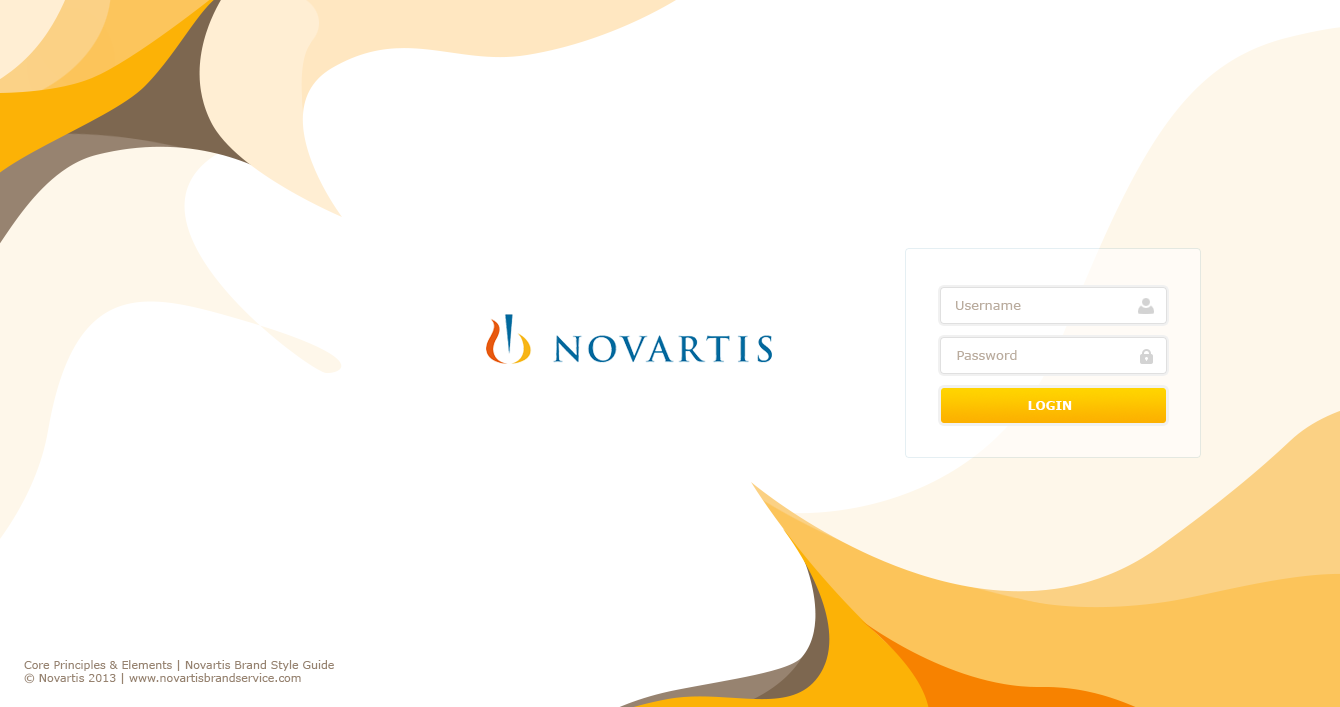
<style>
.page{position:relative;width:1340px;height:707px;background:#ffffff}
.page>*{position:absolute;margin:0}
.t1{font:13px "Verdana";color:#baac9e}
.t2{font:12px "Verdana-Bold";color:#ffffff}
.t3{font:11px "Verdana";color:#978370}
</style>
<div class="page">
<p class="t1" style="left:956px;top:301px;width:65px;height:9px">Username</p>
<p class="t1" style="left:957px;top:350px;width:60px;height:10px">Password</p>
<p class="t2" style="left:1028px;top:401px;width:44px;height:9px">LOGIN</p>
<p class="t3" style="left:24px;top:660px;width:310px;height:24px">Core Principles &amp; Elements | Novartis Brand Style Guide<br>© Novartis 2013 | www.novartisbrandservice.com</p>
</div>
